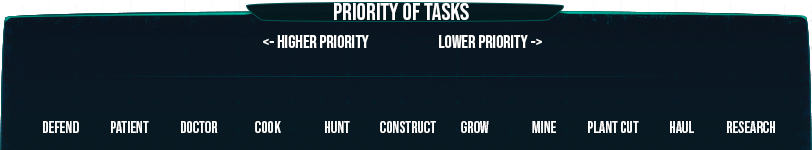
<style>
.page{position:relative;width:812px;height:150px}
.page>*{position:absolute;margin:0}
.t1{font:24px "BebasNeue-Regular";color:#ffffff}
.t2{font:18px "BebasNeue-Regular";color:#ffffff}
.t3{font:16px "BebasNeue-Regular";color:#ffffff}
</style>
<div class="page">
<p class="t1" style="left:334px;top:3px;width:135px;height:17px">Priority of tasks</p>
<p class="t2" style="left:263px;top:35px;width:279px;height:13px">&lt;- Higher priority   lower priority -&gt;</p>
<p class="t3" style="left:43px;top:121px;width:36px;height:12px">DEFEND</p>
<p class="t3" style="left:111px;top:121px;width:38px;height:12px">patient</p>
<p class="t3" style="left:181px;top:121px;width:37px;height:12px">doctor</p>
<p class="t3" style="left:255px;top:121px;width:26px;height:12px">cook</p>
<p class="t3" style="left:325px;top:121px;width:25px;height:12px">hunt</p>
<p class="t3" style="left:380px;top:121px;width:56px;height:12px">construct</p>
<p class="t3" style="left:461px;top:121px;width:28px;height:12px">grow</p>
<p class="t3" style="left:532px;top:121px;width:24px;height:12px">mine</p>
<p class="t3" style="left:588px;top:121px;width:51px;height:12px">plant cut</p>
<p class="t3" style="left:670px;top:121px;width:24px;height:12px">haul</p>
<p class="t3" style="left:727px;top:121px;width:48px;height:12px">research</p>
</div>
